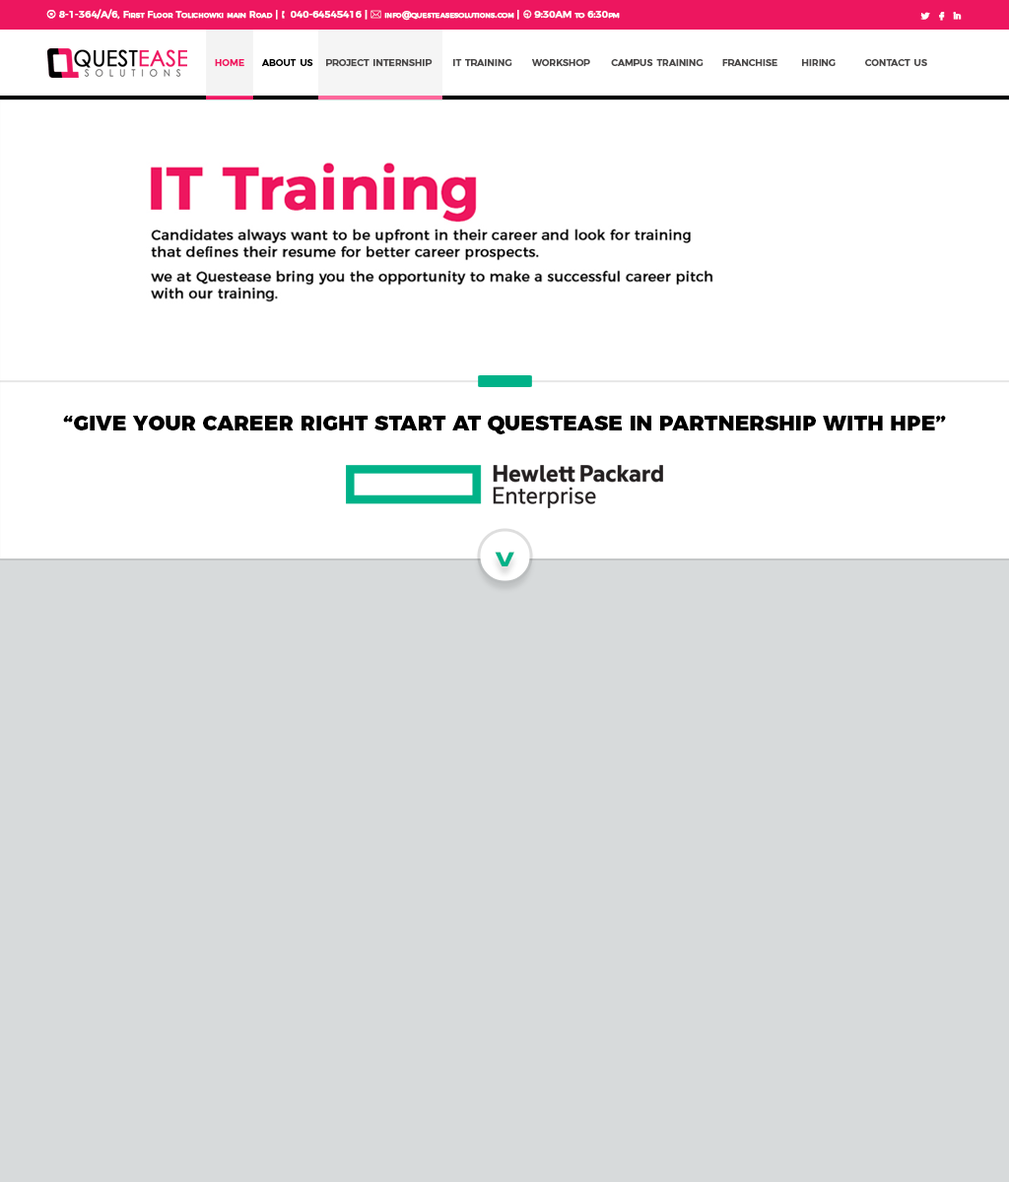
<style>
.page{position:relative;width:1009px;height:1182px;background:#d7dadb}
.page>*{position:absolute;margin:0}
.t1{font:9.9px "Montserrat-Medium";letter-spacing:-0.021em;color:#ffffff;font-variant:small-caps;font-weight:bold}
.t2{font:10.8px "Wingdings2";letter-spacing:-0.021em;color:#ffffff;font-variant:small-caps;font-weight:bold}
.t3{font:9.9px "Webdings";letter-spacing:-0.021em;color:#ffffff;font-variant:small-caps;font-weight:bold}
.t4{font:9.9px "Wingdings-Regular";letter-spacing:-0.021em;color:#ffffff;font-variant:small-caps;font-weight:bold}
.t5{font:9.9px "Wingdings2";letter-spacing:-0.021em;color:#ffffff;font-variant:small-caps;font-weight:bold}
.t6{font:13.8px "Socialico";letter-spacing:-0.021em;color:#ffffff;font-variant:small-caps;font-weight:bold}
.t7{font:13.2px "Montserrat-Medium";letter-spacing:-0.021em;color:#4a4848;font-variant:small-caps;font-weight:bold}
.t8{font:13.2px "Montserrat-Medium";letter-spacing:-0.021em;color:#f01662;font-variant:small-caps;font-weight:bold}
.t9{font:13.2px "Montserrat-Medium";letter-spacing:-0.021em;color:#000000;font-variant:small-caps;font-weight:bold}
.t10{font:21.2px "Montserrat-Black";letter-spacing:-0.001em;color:#000000}
.t11{font:36.4px "Montserrat-ExtraBold";letter-spacing:-0.001em;color:#00b288;scale:0.86 1}
</style>
<div class="page">
<p class="t1" style="left:46px;top:9px;width:574px;height:12px"><span class="t2">8</span> 8-1-364/A/6, First Floor Tolichowki main Road | <span class="t3">Å </span>040-64545416 | <span class="t4">*</span> info@questeasesolutions.com | <span class="t5"></span> 9:30AM to 6:30pm</p>
<p class="t6" style="left:920px;top:12px;width:41px;height:9px">L  F  I</p>
<p class="t7" style="left:215px;top:59px;width:712px;height:8px"><span class="t8">home  </span><span class="t9">about us  </span>project internship   it training  workshop  campus training  franchise  hiring  contact us</p>
<p class="t10" style="left:63px;top:416px;width:883px;height:18px">“GIVE YOUR CAREER RIGHT START AT QUESTEASE IN PARTNERSHIP WITH HPE”</p>
<p class="t11" style="left:495px;top:552px;width:19px;height:14px;rotate:90deg">&gt;</p>
</div>
